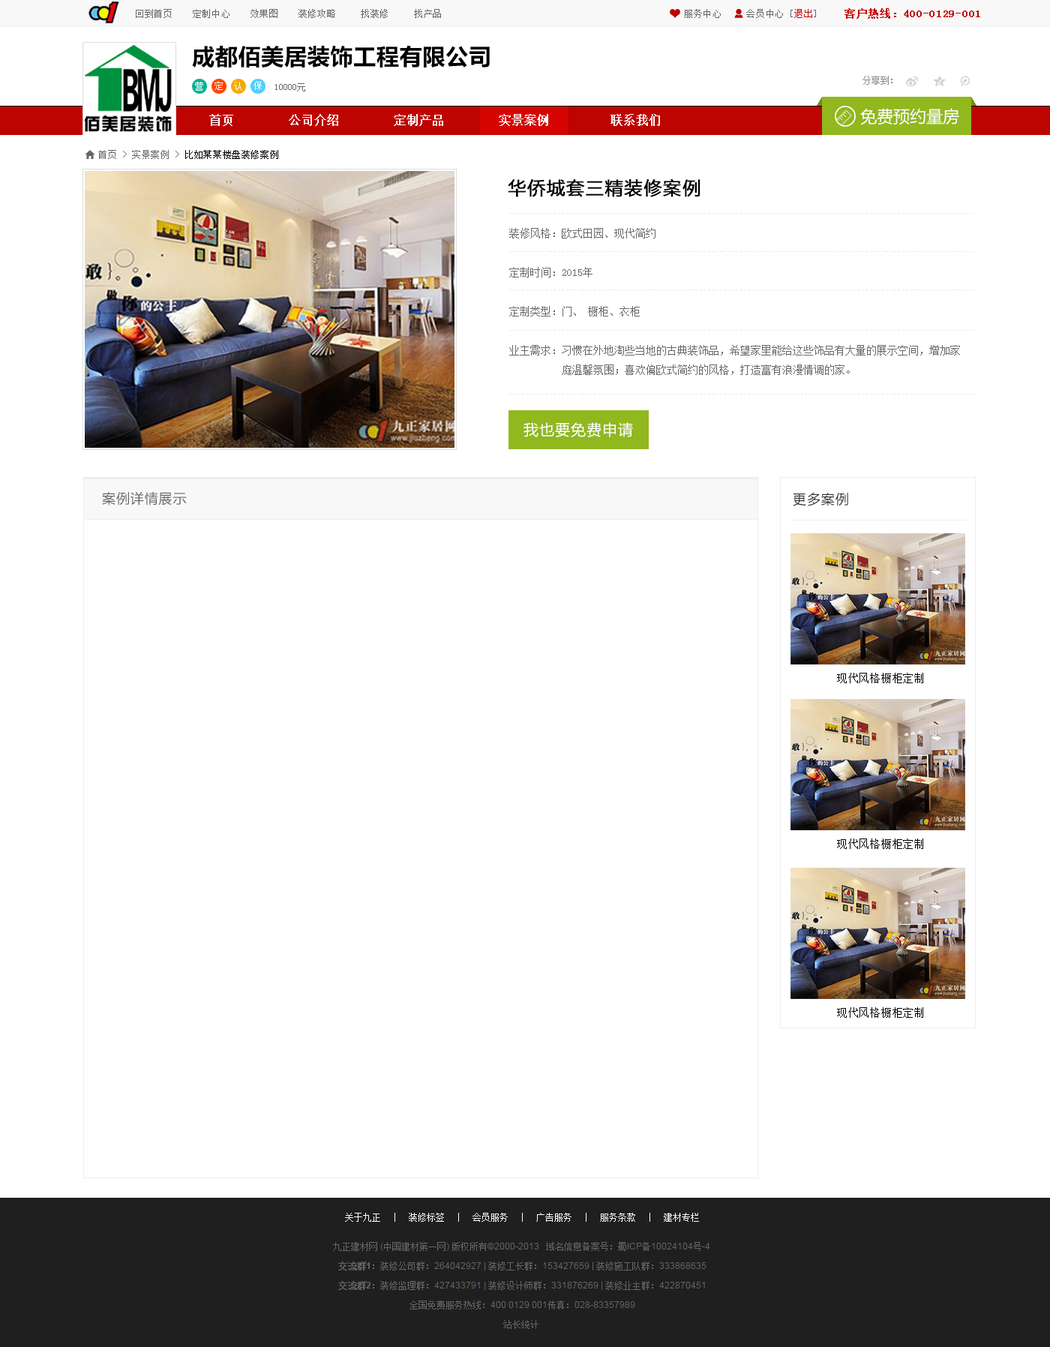
<style>
.page{position:relative;width:1050px;height:1347px;background:#ffffff}
.page>*{position:absolute;margin:0}
.t1{font:9px "NSimSun";letter-spacing:0.05em;color:#666666}
.t2{font:9px "NSimSun";letter-spacing:0.05em;color:#bc0500}
.t3{font:10.5px "NSimSun";letter-spacing:0.05em;color:#bc0500;font-weight:bold}
.t4{font:22.5px "MicrosoftYaHei-Bold";letter-spacing:0.025em;color:#000000}
.t5{font:9px "NSimSun";letter-spacing:0.075em;color:#ffffff}
.t6{font:9px "NSimSun";color:#666666}
.t7{font:16.5px "MicrosoftYaHei";color:#ffffff}
.t8{font:12px "NSimSun";color:#ffffff;font-weight:bold}
.t9{font:9px "NSimSun";letter-spacing:0.05em;color:#000000}
.t10{font:18px "MicrosoftYaHei";letter-spacing:0.05em;color:#000000;font-weight:bold}
.t11{font:4.5px "NSimSun";letter-spacing:0.4em;color:#e9e9eb}
.t12{font:10.5px/19.5px "NSimSun";color:#666666}
.t13{font:15px "MicrosoftYaHei";letter-spacing:0.05em;color:#ffffff}
.t14{font:13.5px "MicrosoftYaHei";letter-spacing:0.05em;color:#666666}
.t15{font:13.5px "MicrosoftYaHei";letter-spacing:0.05em;color:#333333}
.t16{font:10.5px "NSimSun";letter-spacing:0.05em;color:#000000}
</style>
<div class="page">
<p class="t1" style="left:136px;top:9px;width:305px;height:9px">回到首页    定制中心    效果图    装修攻略     找装修     找产品</p>
<p class="t1" style="left:684px;top:9px;width:132px;height:9px">服务中心     会员中心 [<span class="t2">退出</span>]</p>
<p class="t3" style="left:844px;top:8px;width:136px;height:11px">客户热线：400-0129-001</p>
<p class="t4" style="left:192px;top:45px;width:298px;height:23px">成都佰美居装饰工程有限公司</p>
<p class="t5" style="left:195px;top:82px;width:8px;height:9px">营</p>
<p class="t5" style="left:214px;top:81px;width:9px;height:9px">定</p>
<p class="t5" style="left:234px;top:82px;width:8px;height:9px">认</p>
<p class="t5" style="left:254px;top:81px;width:8px;height:9px">保</p>
<p class="t6" style="left:275px;top:83px;width:30px;height:9px">10000元</p>
<p class="t7" style="left:860px;top:108px;width:99px;height:17px">免费预约量房</p>
<p class="t8" style="left:209px;top:114px;width:451px;height:12px">首页        公司介绍        定制产品        实景案例         联系我们</p>
<p class="t1" style="left:98px;top:150px;width:180px;height:9px">首页 &gt; 实景案例 &gt; <span class="t9">比如某某楼盘装修案例</span></p>
<p class="t10" style="left:508px;top:178px;width:192px;height:19px">华侨城套三精装修案例</p>
<p class="t11" style="left:509px;top:213px;width:465px;height:1px">-------------------------------------------------------------------------------------------------------------------</p>
<p class="t12" style="left:509px;top:228px;width:451px;height:147px">装修风格：欧式田园、现代简约<br><br>定制时间：2015年<br><br>定制类型：门、 橱柜、衣柜<br><br>业主需求：习惯在外地淘些当地的古典装饰品，希望家里能给这些饰品有大量的展示空间，增加家<br>          庭温馨氛围；喜欢偏欧式简约的风格，打造富有浪漫情调的家。</p>
<p class="t11" style="left:509px;top:251px;width:465px;height:1px">-------------------------------------------------------------------------------------------------------------------</p>
<p class="t11" style="left:509px;top:290px;width:465px;height:0px">-------------------------------------------------------------------------------------------------------------------</p>
<p class="t11" style="left:509px;top:330px;width:465px;height:1px">-------------------------------------------------------------------------------------------------------------------</p>
<p class="t11" style="left:509px;top:394px;width:465px;height:0px">-------------------------------------------------------------------------------------------------------------------</p>
<p class="t13" style="left:524px;top:422px;width:109px;height:15px">我也要免费申请</p>
<p class="t14" style="left:102px;top:491px;width:85px;height:15px">案例详情展示</p>
<p class="t15" style="left:793px;top:493px;width:55px;height:13px">更多案例</p>
<p class="t16" style="left:837px;top:673px;width:86px;height:10px">现代风格橱柜定制</p>
<p class="t16" style="left:837px;top:838px;width:86px;height:11px">现代风格橱柜定制</p>
<p class="t16" style="left:837px;top:1007px;width:86px;height:11px">现代风格橱柜定制</p>
</div>
